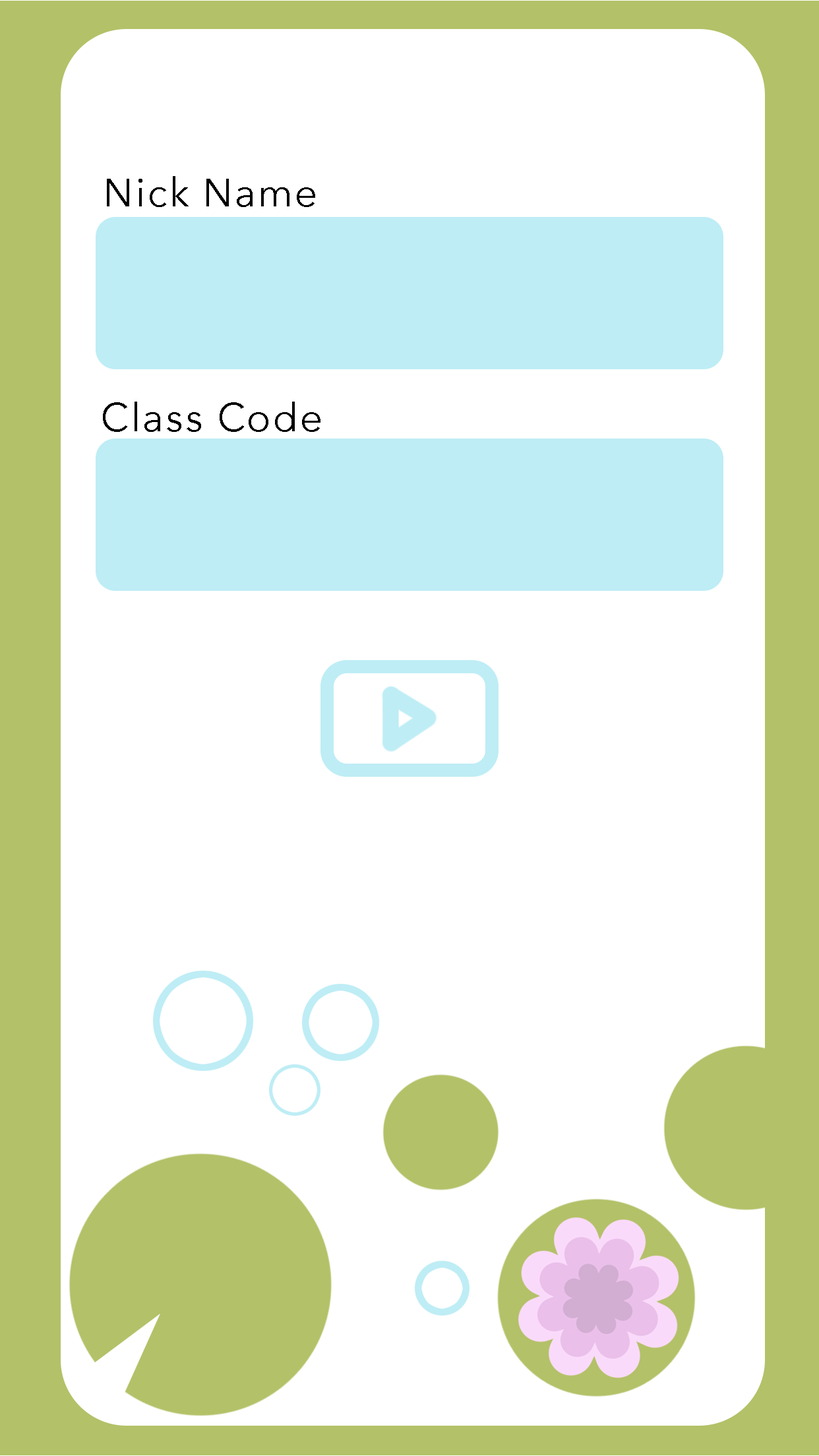
<style>
.page{position:relative;width:819px;height:1456px;background:#ffffff}
.page>*{position:absolute;margin:0}
.t1{font:39.6px "AvenirNext-Regular";letter-spacing:0.05em;color:#000000}
</style>
<div class="page">
<p class="t1" style="left:107px;top:176px;width:208px;height:31px">Nick Name</p>
<p class="t1" style="left:103px;top:402px;width:217px;height:30px">Class Code</p>
</div>
